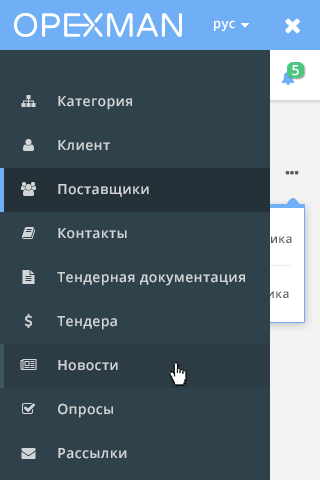
<style>
.page{position:relative;width:320px;height:480px;background:#2f414b}
.page>*{position:absolute;margin:0}
.t1{font:13px "OpenSans-Semibold";letter-spacing:0.025em;color:#ffffff}
.t2{font:13.9px "OpenSans-Semibold";letter-spacing:0.025em;color:#ffffff}
.t3{font:13.9px "OpenSans-Semibold";letter-spacing:0.025em;color:#d2d5d7}
</style>
<div class="page">
<p class="t1" style="left:214px;top:20px;width:21px;height:11px">рус</p>
<p class="t1" style="left:214px;top:20px;width:21px;height:11px">рус</p>
<p class="t2" style="left:292px;top:65px;width:7px;height:11px">5</p>
<p class="t3" style="left:58px;top:96px;width:74px;height:14px">Категория</p>
<p class="t3" style="left:58px;top:140px;width:52px;height:11px">Клиент</p>
<p class="t3" style="left:58px;top:184px;width:91px;height:13px">Поставщики</p>
<p class="t3" style="left:58px;top:228px;width:69px;height:11px">Контакты</p>
<p class="t3" style="left:57px;top:272px;width:188px;height:14px">Тендерная документация</p>
<p class="t3" style="left:57px;top:316px;width:60px;height:14px">Тендера</p>
<p class="t3" style="left:58px;top:360px;width:60px;height:11px">Новости</p>
<p class="t3" style="left:58px;top:403px;width:55px;height:15px">Опросы</p>
<p class="t3" style="left:58px;top:448px;width:69px;height:11px">Рассылки</p>
</div>
